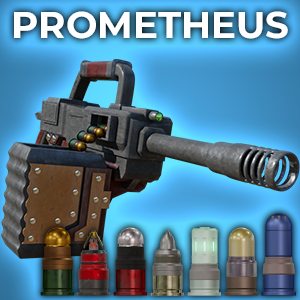
<style>
.page{position:relative;width:300px;height:300px}
.page>*{position:absolute;margin:0}
.t1{font:37.3px "Montserrat-Bold";color:#ffffff}
</style>
<div class="page">
<p class="t1" style="left:14px;top:11px;width:274px;height:28px">PROMETHEUS</p>
</div>
